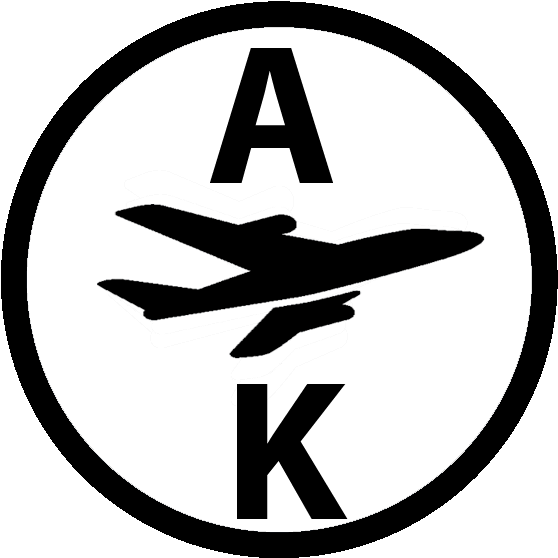
<style>
.page{position:relative;width:558px;height:558px;background:#ffffff}
.page>*{position:absolute;margin:0}
.t1{font:200px "MyriadPro-Bold";color:#000000}
</style>
<div class="page">
<p class="t1" style="left:210px;top:48px;width:123px;height:135px">A</p>
<p class="t1" style="left:237px;top:384px;width:111px;height:135px">K</p>
</div>
